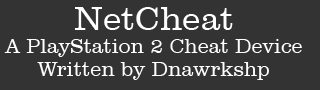
<style>
.page{position:relative;width:320px;height:90px;background:#333333}
.page>*{position:absolute;margin:0}
.t1{font:34.6px "ClarendonBT-Light";color:#ffffff}
.t2{font:20.8px "ClarendonBT-Light";color:#ffffff}
</style>
<div class="page">
<p class="t1" style="left:75px;top:7px;width:158px;height:23px">NetCheat</p>
<p class="t2" style="left:4px;top:39px;width:298px;height:18px">A PlayStation 2 Cheat Device</p>
<p class="t2" style="left:37px;top:62px;width:232px;height:18px">Written by Dnawrkshp</p>
</div>
